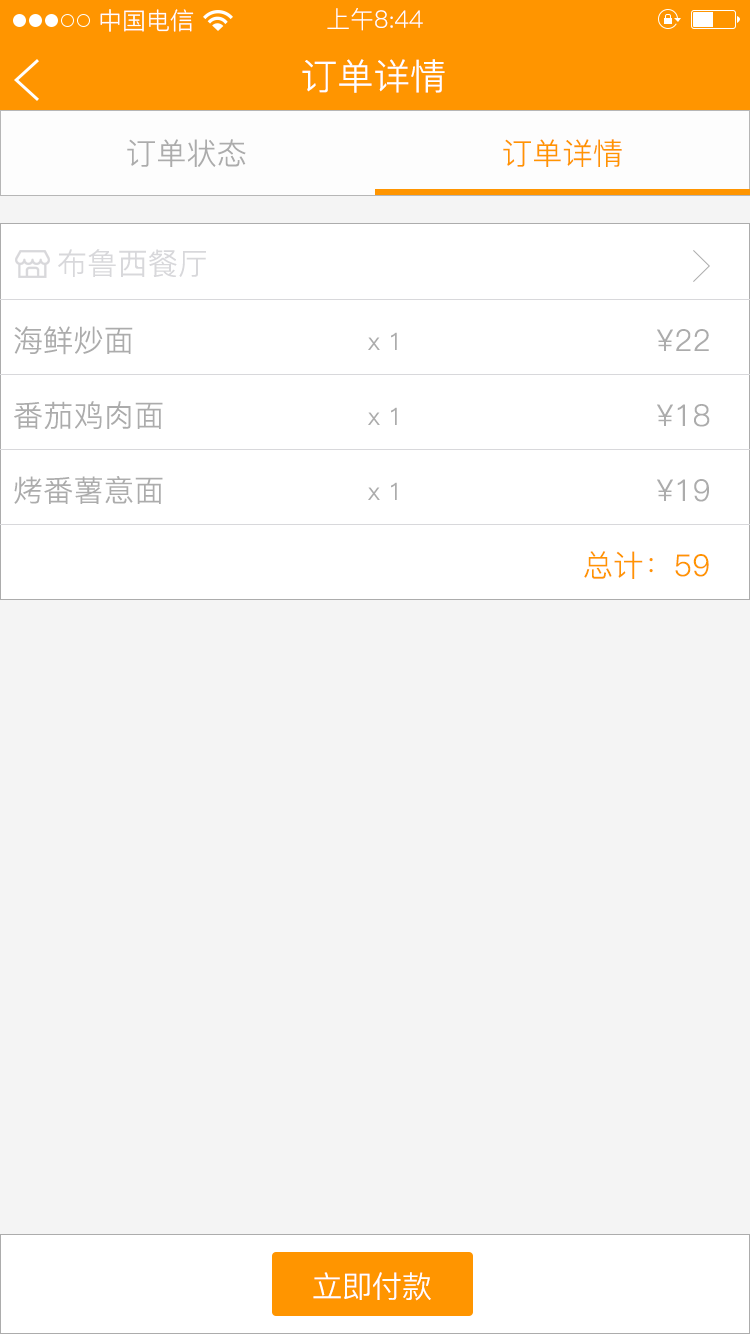
<style>
.page{position:relative;width:750px;height:1334px;background:#f4f4f4}
.page>*{position:absolute;margin:0}
.t1{font:24px "PingFang-SC-Regular";color:#ffffff}
.t2{font:36px "PingFang-SC-Regular";letter-spacing:0.01em;color:#ffffff}
.t3{font:30px "PingFang-SC-Regular";letter-spacing:0.01em;color:#acacac}
.t4{font:30px "PingFang-SC-Regular";letter-spacing:0.01em;color:#ff9500}
.t5{font:30px "PingFang-SC-Regular";letter-spacing:0.01em;color:#d8d8db}
.t6{font:24px "PingFang-SC-Regular";letter-spacing:0.01em;color:#acacac}
.t7{font:30px "PingFang-SC-Regular";color:#ffffff}
</style>
<div class="page">
<p class="t1" style="left:100px;top:9px;width:94px;height:23px">中国电信</p>
<p class="t1" style="left:327px;top:8px;width:96px;height:23px">上午8:44</p>
<p class="t2" style="left:302px;top:59px;width:143px;height:34px">订单详情</p>
<p class="t3" style="left:127px;top:139px;width:119px;height:28px">订单状态</p>
<p class="t4" style="left:503px;top:139px;width:119px;height:28px">订单详情</p>
<p class="t5" style="left:58px;top:249px;width:148px;height:28px">布鲁西餐厅</p>
<p class="t3" style="left:14px;top:326px;width:119px;height:29px">海鲜炒面</p>
<p class="t3" style="left:657px;top:329px;width:52px;height:22px">¥22</p>
<p class="t6" style="left:368px;top:332px;width:29px;height:18px">x 1</p>
<p class="t3" style="left:14px;top:401px;width:149px;height:28px">番茄鸡肉面</p>
<p class="t6" style="left:368px;top:407px;width:29px;height:18px">x 1</p>
<p class="t3" style="left:657px;top:404px;width:53px;height:23px">¥18</p>
<p class="t3" style="left:14px;top:476px;width:149px;height:28px">烤番薯意面</p>
<p class="t6" style="left:368px;top:482px;width:29px;height:18px">x 1</p>
<p class="t3" style="left:657px;top:479px;width:52px;height:23px">¥19</p>
<p class="t4" style="left:584px;top:551px;width:125px;height:28px">总计：59</p>
<p class="t7" style="left:313px;top:1272px;width:118px;height:29px">立即付款</p>
</div>
